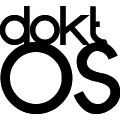
<style>
.page{position:relative;width:120px;height:120px;background:#ffffff}
.page>*{position:absolute;margin:0}
.t1{font:66.7px "futuremood";color:#000000}
.t2{font:108.3px "futuremood";color:#000000}
</style>
<div class="page">
<p class="t1" style="left:0px;top:6px;width:108px;height:39px">dokt</p>
<p class="t2" style="left:0px;top:42px;width:121px;height:72px">OS</p>
</div>
